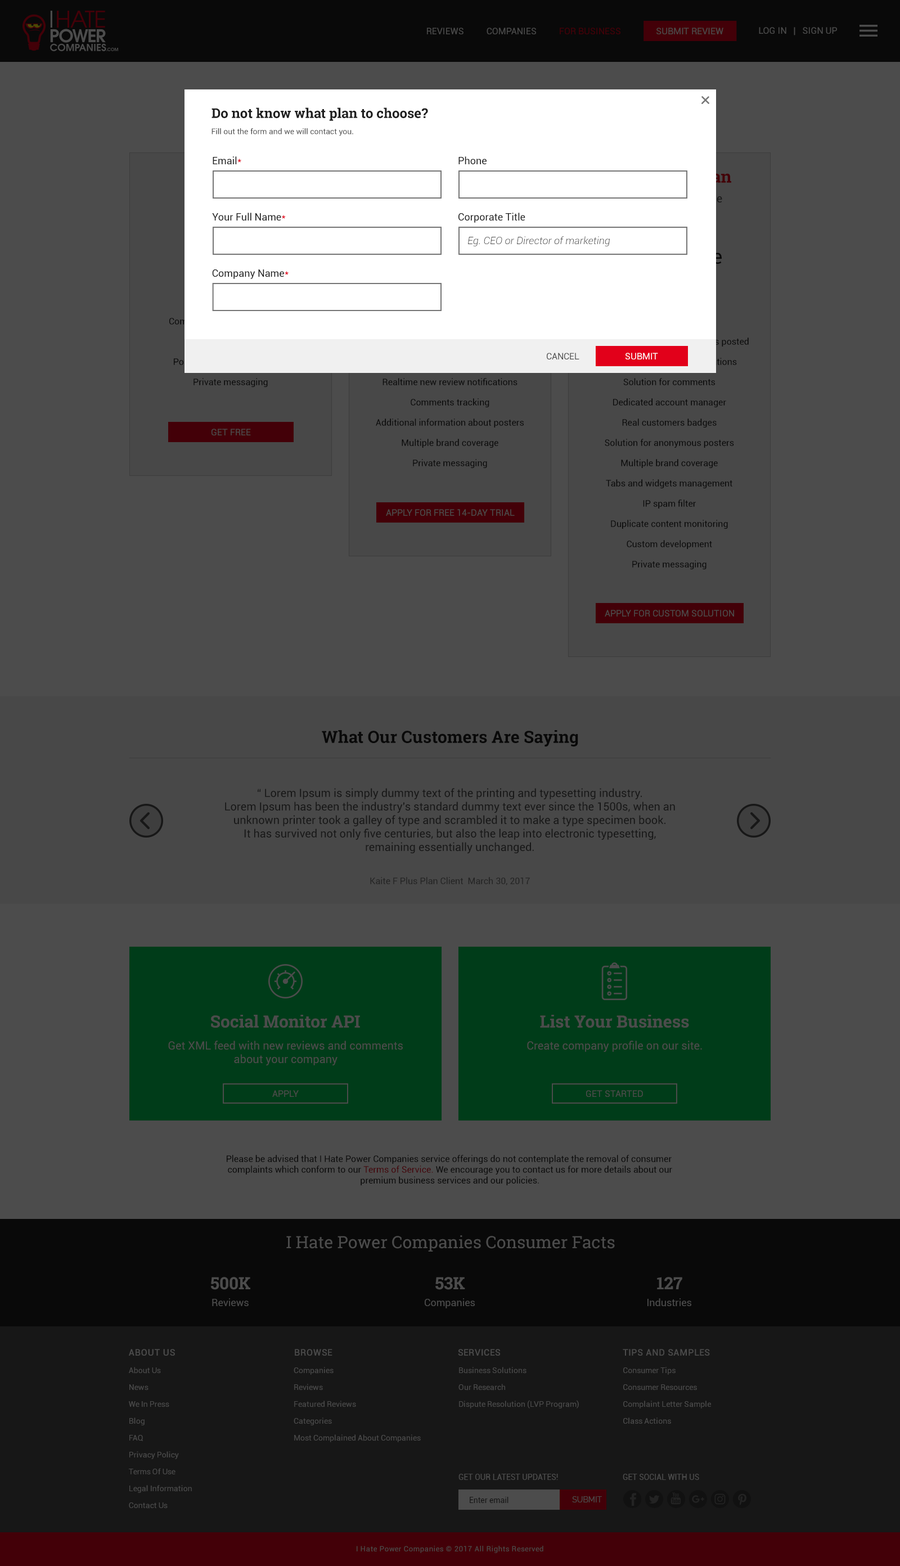
<style>
.page{position:relative;width:900px;height:1566px;background:#4c4c4c}
.page>*{position:absolute;margin:0}
.t1{font:9px "Roboto-Regular";text-transform:uppercase}
.t2{font:9px "Roboto-Regular";color:#4c4c4c;text-transform:uppercase}
.t3{font:13.5px "RobotoSlab-Bold";color:#1e1e1e}
.t4{font:7.9px "Roboto-Regular";color:#4d4d4d}
.t5{font:10.1px "Roboto-Regular";color:#1e1e1e}
.t6{font:10.1px "Roboto-Regular";color:#e2001a}
.t7{font:10.1px "Roboto-LightItalic";color:#4d4d4d}
.t8{font:9px "Roboto-Regular";color:#4d4d4d;text-transform:uppercase}
.t9{font:9px "Roboto-Regular";color:#ffffff;text-transform:uppercase}
.t10{font:16.9px "RobotoSlab-Bold";color:#1e1e1e}
.t11{font:11.3px/13.5px "Roboto-Regular";color:#171717}
.t12{font:9px "Roboto-Regular";color:#232323}
.t13{font:16.9px "RobotoSlab-Bold";color:#4c4c4c}
.t14{font:11.3px/13.5px "Roboto-Regular";color:#4c4c4c}
.t15{font:11.3px "Roboto-Regular";color:#4c4c4c}
.t16{font:9px "Roboto-Regular";color:#1e1e1e}
.t17{font:9px "Roboto-Regular";color:#e2001a}
.t18{font:16.9px "RobotoSlab-Regular";color:#4c4c4c}
.t19{font:10.1px "Roboto-Regular";color:#4c4c4c}
.t20{font:9px "Roboto-Medium";letter-spacing:0.04em;color:#4c4c4c;text-transform:uppercase}
.t21{font:7.9px/16.9px "Roboto-Regular";color:#4c4c4c}
.t22{font:7.9px "Roboto-Regular";color:#4c4c4c;text-transform:uppercase}
.t23{font:7.8px "Roboto-Regular";color:#171717}
.t24{font:7.9px "Raleway-Regular";color:#4c4c4c}
.t25{font:7.3px "Roboto-Regular";letter-spacing:0.04em;color:#4c4c4c}
</style>
<div class="page">
<p class="t1" style="left:427px;top:28px;width:193px;height:6px">Reviews          Companies          For Business</p>
<p class="t2" style="left:656px;top:28px;width:67px;height:6px">submit review</p>
<p class="t2" style="left:759px;top:27px;width:78px;height:8px">Log in   |   Sign up</p>
<p class="t3" style="left:212px;top:107px;width:216px;height:14px">Do not know what plan to choose?</p>
<p class="t4" style="left:212px;top:128px;width:141px;height:8px">Fill out the form and we will contact you.</p>
<p class="t5" style="left:213px;top:156px;width:28px;height:9px">Email<span class="t6">*</span></p>
<p class="t5" style="left:458px;top:156px;width:29px;height:8px">Phone</p>
<p class="t5" style="left:212px;top:213px;width:74px;height:8px">Your Full Name<span class="t6">*</span></p>
<p class="t5" style="left:458px;top:213px;width:67px;height:10px">Corporate Title</p>
<p class="t7" style="left:468px;top:236px;width:142px;height:10px">Eg. CEO or Director of marketing</p>
<p class="t5" style="left:212px;top:269px;width:77px;height:10px">Company Name<span class="t6">*</span></p>
<p class="t8" style="left:547px;top:353px;width:32px;height:6px">CANCEL</p>
<p class="t9" style="left:626px;top:353px;width:32px;height:6px">SUBMIT</p>
<p class="t2" style="left:212px;top:429px;width:39px;height:6px">GET free</p>
<p class="t2" style="left:386px;top:509px;width:129px;height:7px">Apply for free 14-day trial</p>
<p class="t2" style="left:605px;top:610px;width:129px;height:7px">Apply for custom solution</p>
<p class="t10" style="left:322px;top:730px;width:256px;height:17px">What Our Customers Are Saying</p>
<p class="t11" style="left:225px;top:788px;width:450px;height:65px;text-align:center">“ Lorem Ipsum is simply dummy text of the printing and typesetting industry.<br>Lorem Ipsum has been the industry's standard dummy text ever since the 1500s, when an<br>unknown printer took a galley of type and scrambled it to make a type specimen book.<br>It has survived not only five centuries, but also the leap into electronic typesetting,<br>remaining essentially unchanged.</p>
<p class="t12" style="left:370px;top:877px;width:160px;height:8px">Kaite F Plus Plan Client  March 30, 2017</p>
<p class="t13" style="left:211px;top:1015px;width:149px;height:13px">Social Monitor API</p>
<p class="t13" style="left:540px;top:1015px;width:149px;height:13px">List Your Business</p>
<p class="t14" style="left:168px;top:1041px;width:235px;height:24px;text-align:center">Get XML feed with new reviews and comments<br>about your company</p>
<p class="t15" style="left:527px;top:1041px;width:175px;height:11px">Create company profile on our site.</p>
<p class="t2" style="left:272px;top:1090px;width:27px;height:7px">Apply</p>
<p class="t2" style="left:586px;top:1090px;width:57px;height:7px">Get started</p>
<p class="t16" style="left:227px;top:1155px;width:445px;height:31px;text-align:center">Please be advised that I Hate Power Companies service offerings do not contemplate the removal of consumer <br>complaints which conform to our <span class="t17">Terms of Service.</span> We encourage you to contact us for more details about our<br>premium business services and our policies.</p>
<p class="t18" style="left:286px;top:1235px;width:329px;height:17px">I Hate Power Companies Consumer Facts</p>
<p class="t13" style="left:211px;top:1277px;width:39px;height:13px">500K</p>
<p class="t13" style="left:435px;top:1277px;width:30px;height:13px">53K</p>
<p class="t13" style="left:657px;top:1277px;width:25px;height:12px">127</p>
<p class="t19" style="left:212px;top:1298px;width:37px;height:8px">Reviews</p>
<p class="t19" style="left:425px;top:1298px;width:50px;height:10px">Companies</p>
<p class="t19" style="left:647px;top:1298px;width:44px;height:9px">Industries</p>
<p class="t20" style="left:129px;top:1349px;width:46px;height:7px">About Us</p>
<p class="t20" style="left:295px;top:1349px;width:37px;height:7px">Browse</p>
<p class="t20" style="left:458px;top:1349px;width:42px;height:7px">Services</p>
<p class="t20" style="left:623px;top:1349px;width:87px;height:7px">Tips and Samples</p>
<p class="t21" style="left:129px;top:1367px;width:63px;height:142px">About Us<br>News<br>We In Press<br>Blog<br>FAQ<br>Privacy Policy<br>Terms Of Use<br>Legal Information<br>Contact Us</p>
<p class="t21" style="left:294px;top:1367px;width:127px;height:75px">Companies<br>Reviews<br>Featured Reviews<br>Categories<br>Most Complained About Companies</p>
<p class="t21" style="left:458px;top:1367px;width:121px;height:42px">Business Solutions<br>Our Research<br>Dispute Resolution (LVP Program)</p>
<p class="t21" style="left:623px;top:1367px;width:88px;height:57px">Consumer Tips<br>Consumer Resources<br>Complaint Letter Sample<br>Class Actions</p>
<p class="t22" style="left:458px;top:1474px;width:100px;height:6px">Get our latest updates!</p>
<p class="t22" style="left:623px;top:1474px;width:76px;height:6px">Get SOCIAL WITH US</p>
<p class="t23" style="left:470px;top:1497px;width:39px;height:6px">Enter email</p>
<p class="t24" style="left:572px;top:1496px;width:30px;height:6px">SUBMIT</p>
<p class="t25" style="left:357px;top:1546px;width:186px;height:7px">I Hate Power Companies © 2017 All Rights Reserved</p>
</div>
